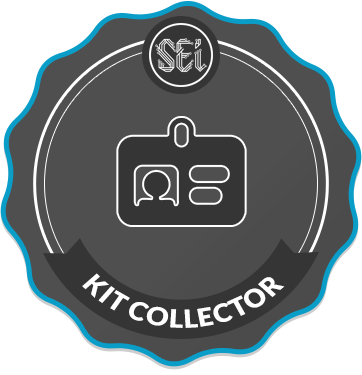
<style>
.page{position:relative;width:362px;height:375px;background:#4f4f4f}
.page>*{position:absolute;margin:0}
.t1{font:25px/53.5px "Lato-Black";letter-spacing:0.06em;color:#ffffff;scale:1.11 1}
</style>
<div class="page">
<p class="t1" style="left:82px;top:273px;width:203px;height:55px;text-align:center">KIT COLLECTOR</p>
</div>
